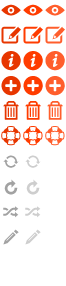
<style>
.page{position:relative;width:66px;height:286px;background:#ffffff}
.page>*{position:absolute;margin:0}
.t1{font:23px/25px "Pictos";letter-spacing:-0.01em;color:#e73600}
.t2{font:18px/25px "Pictos";letter-spacing:-0.01em;color:#a2a2a2}
.t3{font:23px/25px "Pictos";letter-spacing:-0.01em;color:#ff3c00}
.t4{font:18px/25px "Pictos";letter-spacing:-0.01em;color:#cecece}
.t5{font:23px/25px "Pictos";letter-spacing:-0.01em;color:#ff5e2c}
.t6{font:18px/25px "Pictos";letter-spacing:-0.01em;color:#ffffff}
</style>
<div class="page">
<p class="t1" style="left:1px;top:4px;width:20px;height:241px;text-align:center">E<br>W<br>i<br>+<br>#<br>h<br><span class="t2">0<br>1<br>;<br>p</span></p>
<p class="t3" style="left:23px;top:4px;width:20px;height:241px;text-align:center">E<br>W<br>i<br>+<br>#<br>h<br><span class="t4">0<br>1<br>;<br>p</span></p>
<p class="t5" style="left:45px;top:4px;width:20px;height:241px;text-align:center">E<br>W<br>i<br>+<br>#<br>h<br><span class="t6">0<br>1<br>;<br>p</span></p>
</div>
